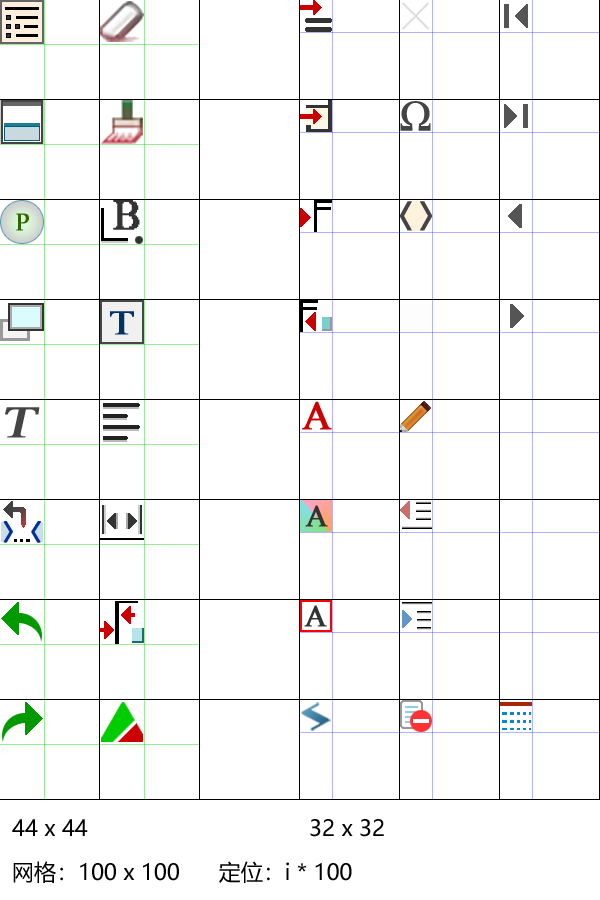
<style>
.page{position:relative;width:600px;height:900px;background:#ffffff}
.page>*{position:absolute;margin:0}
.t1{font:44px "NSimSun";letter-spacing:0.1em;color:#dddddd}
.t2{font:43px "TimesNewRomanPSMT";color:#444444;font-weight:bold}
.t3{font:42px "MS Serif";color:#333333;font-weight:bold}
.t4{font:30px "MicrosoftYaHei";color:#444444;font-weight:bold;scale:1.26 1}
.t5{font:24px "Constantia";color:#336600;font-weight:bold}
.t6{font:34px "TimesNewRomanPSMT";color:#003366;font-weight:bold;scale:1.26 1}
.t7{font:45px "TimesNewRomanPSMT";color:#444444;font-weight:bold;font-style:italic;scale:1.26 1}
.t8{font:26px "NSimSun";letter-spacing:0.1em;color:#003399;font-weight:bold;scale:1.26 1}
.t9{font:22px "MicrosoftYaHei";color:#000000}
</style>
<div class="page">
<p class="t1" style="left:402px;top:2px;width:28px;height:28px">×</p>
<p class="t2" style="left:400px;top:101px;width:31px;height:30px">Ω</p>
<p class="t3" style="left:113px;top:200px;width:27px;height:30px">B</p>
<p class="t4" style="left:399px;top:201px;width:13px;height:30px">〈</p>
<p class="t4" style="left:420px;top:201px;width:13px;height:30px">〉</p>
<p class="t5" style="left:16px;top:213px;width:13px;height:18px">P</p>
<p class="t6" style="left:109px;top:311px;width:26px;height:24px">T</p>
<p class="t7" style="left:5px;top:407px;width:35px;height:31px">T</p>
<p class="t8" style="left:3px;top:521px;width:9px;height:22px">〉</p>
<p class="t8" style="left:4px;top:521px;width:9px;height:22px">〉</p>
<p class="t8" style="left:31px;top:521px;width:9px;height:22px">〈</p>
<p class="t8" style="left:32px;top:521px;width:9px;height:22px">〈</p>
<p class="t9" style="left:12px;top:819px;width:372px;height:18px">44 x 44                                  32 x 32</p>
<p class="t9" style="left:13px;top:861px;width:339px;height:22px">网格：100 x 100      定位：i * 100</p>
</div>
